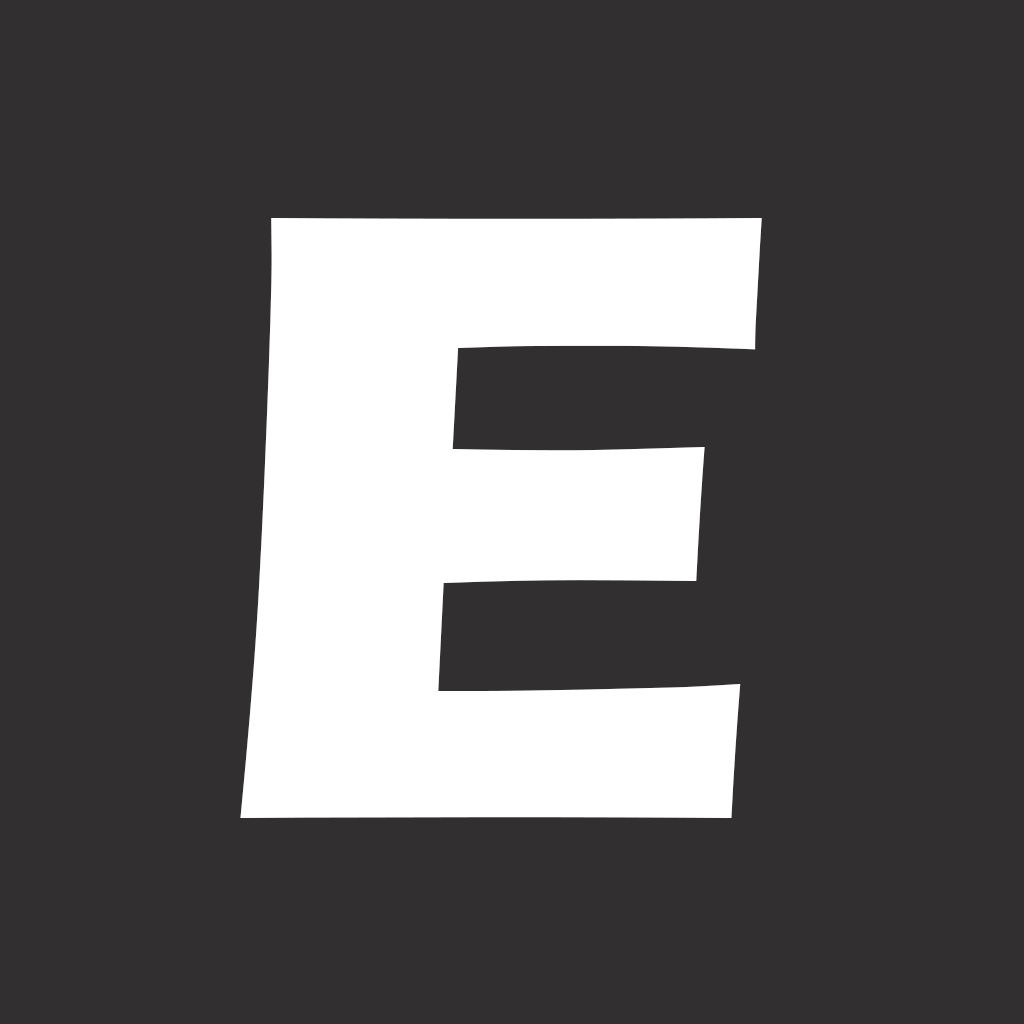
<style>
.page{position:relative;width:1024px;height:1024px;background:#312f2f}
.page>*{position:absolute;margin:0}
.t1{font:900px "ErasITC-Bold";color:#ffffff}
</style>
<div class="page">
<p class="t1" style="left:240px;top:217px;width:522px;height:601px">E</p>
</div>
